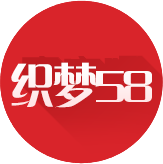
<style>
.page{position:relative;width:163px;height:164px;background:#d9242a}
.page>*{position:absolute;margin:0}
.t1{font:48px "FZCQJW--GB1-0";letter-spacing:-0.075em;color:#ffffff;scale:0.95 1}
</style>
<div class="page">
<p class="t1" style="left:11px;top:62px;width:141px;height:46px">织梦58</p>
</div>
